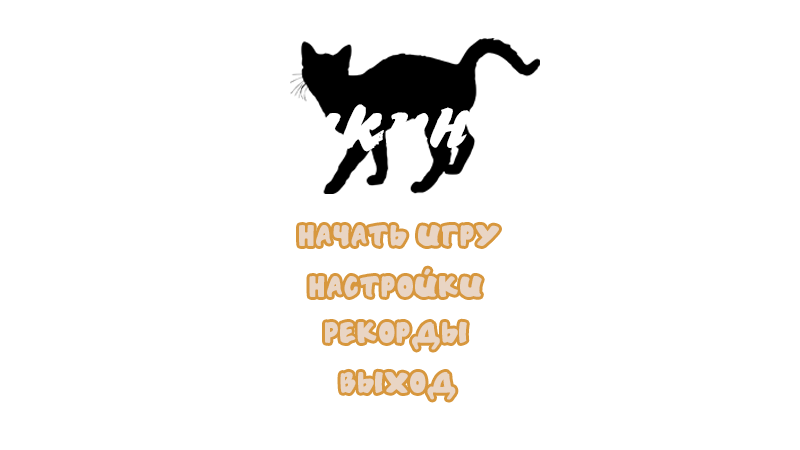
<style>
.page{position:relative;width:800px;height:450px;background:#ffffff}
.page>*{position:absolute;margin:0}
.t1{font:24px "HandSound";color:#e9d5c4}
</style>
<div class="page">
<p class="t1" style="left:299px;top:224px;width:200px;height:22px">Начать игру</p>
<p class="t1" style="left:325px;top:321px;width:142px;height:29px">Рекорды</p>
<p class="t1" style="left:340px;top:371px;width:116px;height:29px">Выход</p>
</div>
